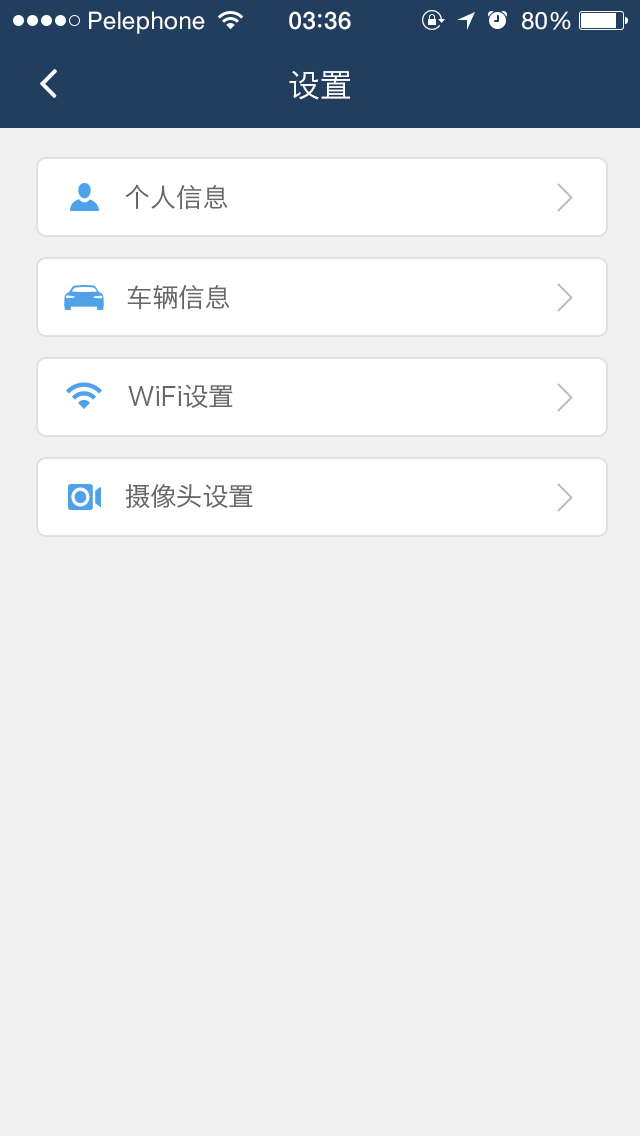
<style>
.page{position:relative;width:640px;height:1136px;background:#f0f0f0}
.page>*{position:absolute;margin:0}
.t1{font:24px "HelveticaNeue";letter-spacing:0.02em;color:#ffffff}
.t2{font:24px "HelveticaNeue-Medium";letter-spacing:0.03em;color:#ffffff}
.t3{font:32px "HiraginoSansGB-W3";color:#ffffff}
.t4{font:26px "HiraginoSansGB-W3";color:#676767}
</style>
<div class="page">
<p class="t1" style="left:89px;top:11px;width:116px;height:23px">Pelephone</p>
<p class="t2" style="left:289px;top:11px;width:62px;height:19px">03 36</p>
<p class="t1" style="left:522px;top:11px;width:49px;height:19px">80%</p>
<p class="t3" style="left:289px;top:71px;width:61px;height:29px">设置</p>
<p class="t4" style="left:125px;top:184px;width:103px;height:26px">个人信息</p>
<p class="t4" style="left:127px;top:285px;width:103px;height:25px">车辆信息</p>
<p class="t4" style="left:128px;top:384px;width:105px;height:24px">WiFi设置</p>
<p class="t4" style="left:125px;top:484px;width:128px;height:24px">摄像头设置</p>
</div>
